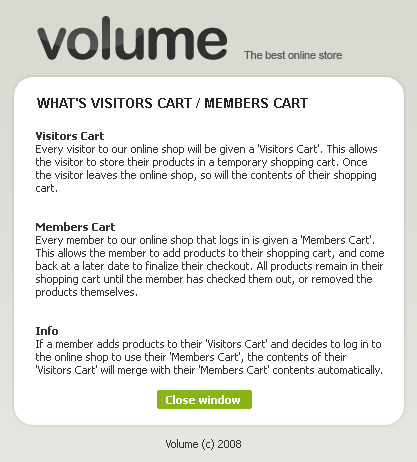
<style>
.page{position:relative;width:417px;height:462px;background:#ffffff}
.page>*{position:absolute;margin:0}
.t1{font:59px "ArialRoundedMTBold";letter-spacing:-0.04em;color:#303030}
.t2{font:11px "ArialMT";letter-spacing:-0.02em;color:#5a5c5e}
.t3{font:13px "Arial-BoldMT";color:#202528;text-transform:uppercase}
.t4{font:11px/13px "Tahoma";color:#353434}
.t5{font:11px/13px "Tahoma-Bold";color:#353434}
.t6{font:11px "Tahoma-Bold";color:#ffffff}
.t7{font:11px "Tahoma";color:#373232}
</style>
<div class="page">
<p class="t1" style="left:37px;top:16px;width:190px;height:44px">volume</p>
<p class="t2" style="left:244px;top:51px;width:98px;height:8px">The best online store</p>
<p class="t3" style="left:37px;top:98px;width:271px;height:10px">What's Visitors Cart / Members Cart</p>
<p class="t4" style="left:36px;top:132px;width:348px;height:244px"><span class="t5">Visitors Cart<br></span>Every visitor to our online shop will be given a 'Visitors Cart'. This allows the visitor to store their products in a temporary shopping cart. Once the visitor leaves the online shop, so will the contents of their shopping cart.<br><br><br><span class="t5">Members Cart<br></span>Every member to our online shop that logs in is given a 'Members Cart'. This allows the member to add products to their shopping cart, and come back at a later date to finalize their checkout. All products remain in their shopping cart until the member has checked them out, or removed the products themselves.<br><br><br><span class="t5">Info<br></span>If a member adds products to their 'Visitors Cart' and decides to log in to the online shop to use their 'Members Cart', the contents of their 'Visitors Cart' will merge with their 'Members Cart' contents automatically.</p>
<p class="t6" style="left:166px;top:395px;width:74px;height:9px">Close window</p>
<p class="t7" style="left:166px;top:439px;width:75px;height:11px">Volume (c) 2008</p>
</div>
